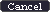
<style>
.page{position:relative;width:50px;height:12px;background:#252434}
.page>*{position:absolute;margin:0}
.t1{font:10px "BookmanOldStyle";color:#ffffff}
</style>
<div class="page">
<p class="t1" style="left:8px;top:3px;width:34px;height:7px">Cancel</p>
</div>
